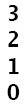
<style>
.page{position:relative;width:26px;height:104px;background:#ffffff}
.page>*{position:absolute;margin:0}
.t1{font:22px "LucidaSans-TypewriterBold";color:#000000}
</style>
<div class="page">
<p class="t1" style="left:7px;top:5px;width:13px;height:95px;text-align:center">3<br>2<br>1<br>0</p>
</div>
